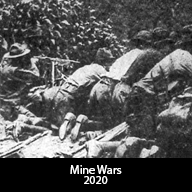
<style>
.page{position:relative;width:192px;height:192px}
.page>*{position:absolute;margin:0}
.t1{font:12px "MyriadPro-Regular";color:#ffffff}
</style>
<div class="page">
<p class="t1" style="left:70px;top:165px;width:52px;height:9px">Mine Wars</p>
<p class="t1" style="left:84px;top:176px;width:24px;height:8px">2020</p>
</div>
